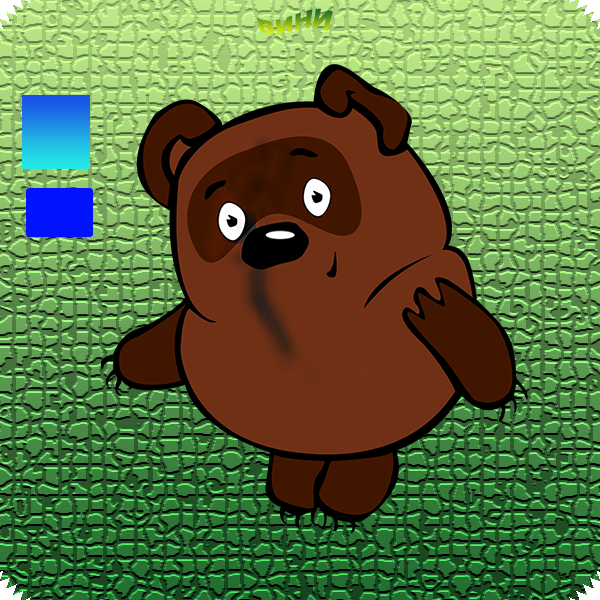
<style>
.page{position:relative;width:600px;height:600px}
.page>*{position:absolute;margin:0}
.t1{font:22.5px "Arial-Black"}
</style>
<div class="page">
<p class="t1" style="left:256px;top:8px;width:77px;height:27px">ВИНИ</p>
</div>
